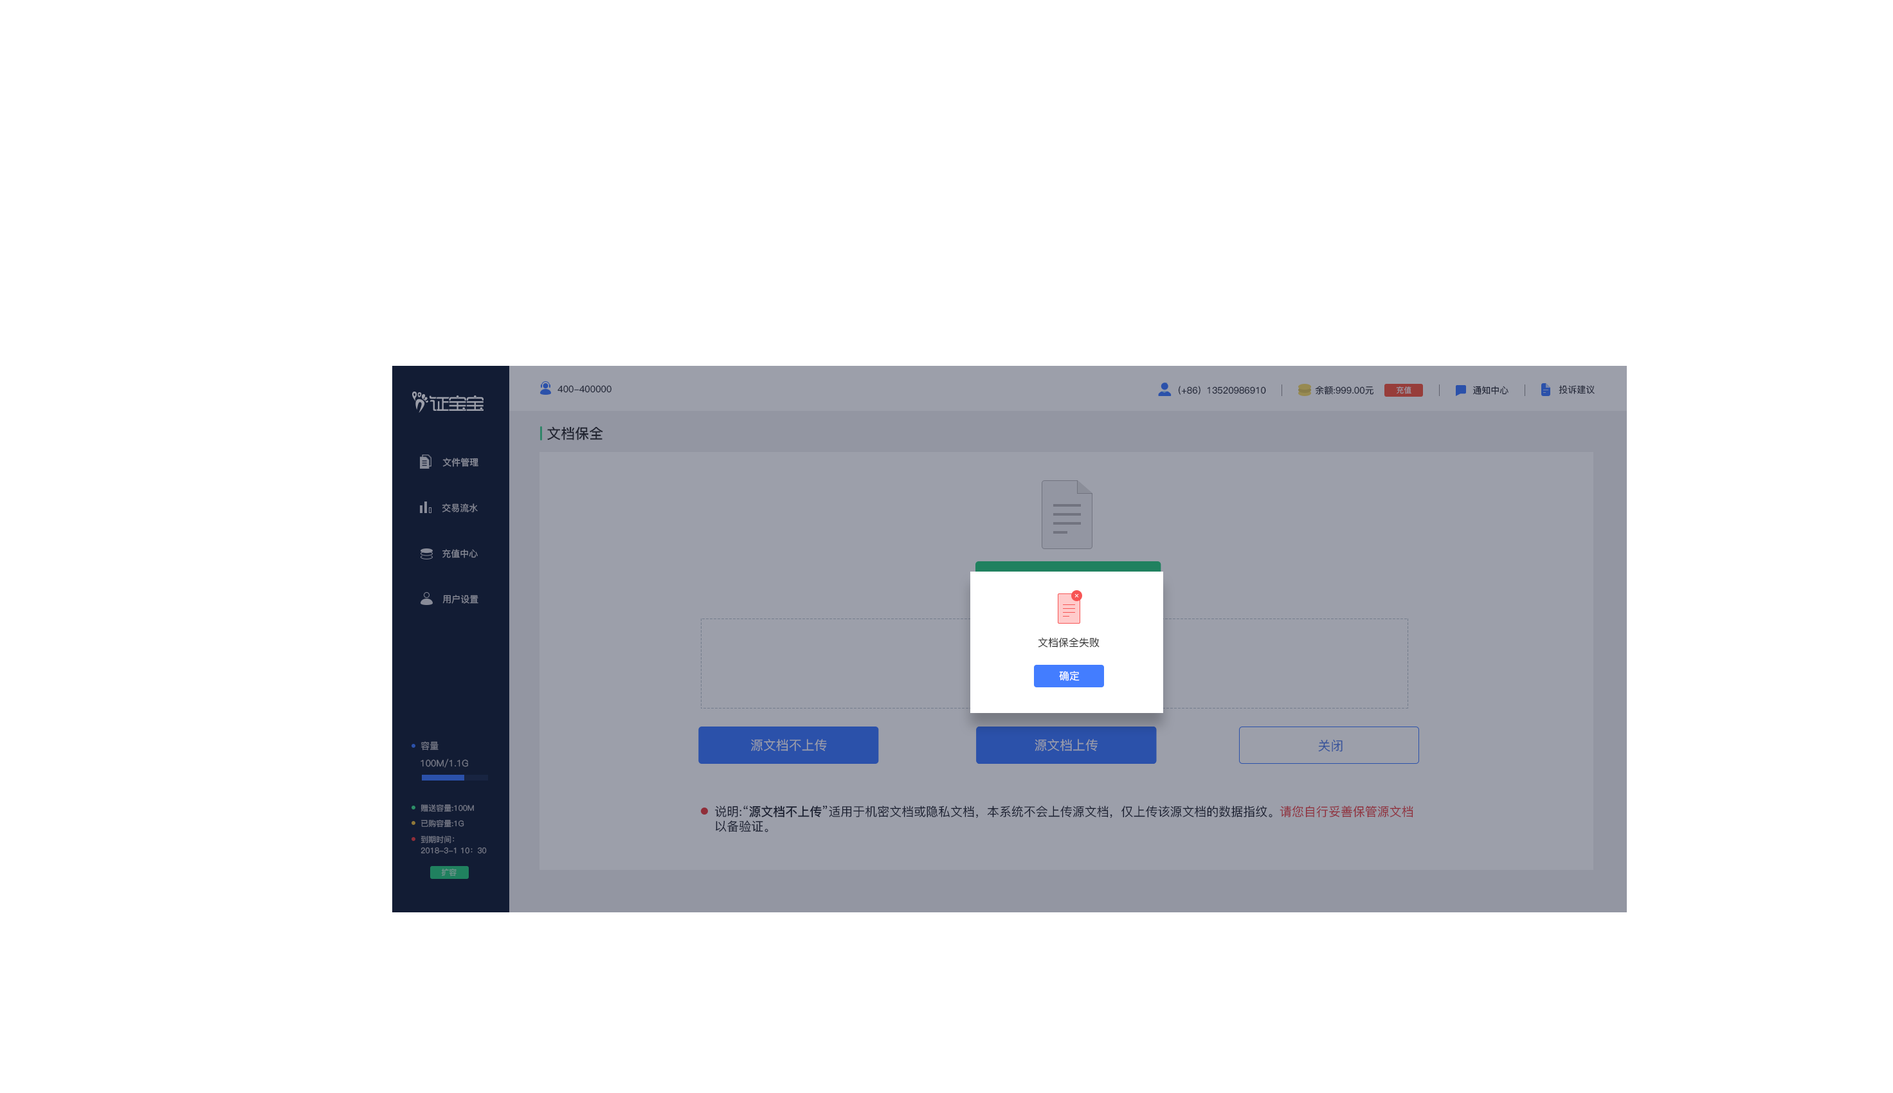
<style>
.page{position:relative;width:1893px;height:1093px;background:#ffffff}
.page>*{position:absolute;margin:0}
.t1{font:9px "PingFang-SC-Medium";color:#232730}
.t2{font:7.7px "PingFang-SC-Medium";color:#9c9faa}
.t3{font:14.1px "PingFang-SC-Bold";color:#333333}
.t4{font:9px "PingFang-SC-Bold";color:#888b98}
.t5{font:9px "PingFang-SC-Medium";color:#898b98}
.t6{font:10.3px "PingFang-SC-Medium";color:#333333}
.t7{font:10.3px "PingFang-SC-Medium";color:#ffffff}
.t8{font:9px "PingFang-SC-Medium";color:#777a88}
.t9{font:13.1px "PingFang-SC-Medium";color:#9c9faa}
.t10{font:12.9px "PingFang-SC-Medium";color:#9c9faa}
.t11{font:12.9px "PingFang-SC-Medium";color:#33519a}
.t12{font:7.7px "PingFang-SC-Medium";color:#777a88}
.t13{font:12.2px "PingFang-SC-Medium";color:#232730}
.t14{font:12.2px "PingFang-SC-Bold";color:#232730}
.t15{font:12.2px "PingFang-SC-Medium";color:#eb4343}
.t16{font:7.7px "PingFang-SC-Medium"}
</style>
<div class="page">
<p class="t1" style="left:557px;top:385px;width:54px;height:8px">400-400000</p>
<p class="t1" style="left:1178px;top:386px;width:88px;height:9px">（+86）13520986910</p>
<p class="t1" style="left:1315px;top:386px;width:59px;height:9px">余额:999.00元</p>
<p class="t2" style="left:1396px;top:386px;width:15px;height:8px">充值</p>
<p class="t1" style="left:1472px;top:386px;width:36px;height:9px">通知中心</p>
<p class="t1" style="left:1558px;top:385px;width:36px;height:9px">投诉建议</p>
<p class="t3" style="left:547px;top:426px;width:56px;height:14px">文档保全</p>
<p class="t4" style="left:442px;top:458px;width:36px;height:9px">文件管理</p>
<p class="t5" style="left:442px;top:503px;width:36px;height:9px">交易流水</p>
<p class="t5" style="left:442px;top:549px;width:36px;height:9px">充值中心</p>
<p class="t5" style="left:442px;top:595px;width:36px;height:9px">用户设置</p>
<p class="t6" style="left:1038px;top:637px;width:61px;height:10px">文档保全失败</p>
<p class="t7" style="left:1059px;top:670px;width:20px;height:11px">确定</p>
<p class="t8" style="left:421px;top:741px;width:17px;height:9px">容量</p>
<p class="t9" style="left:750px;top:739px;width:77px;height:13px">原文档不上传</p>
<p class="t10" style="left:751px;top:739px;width:76px;height:13px">源文档不上传</p>
<p class="t10" style="left:1034px;top:739px;width:64px;height:13px">源文档上传</p>
<p class="t11" style="left:1318px;top:739px;width:24px;height:13px">关闭</p>
<p class="t8" style="left:420px;top:759px;width:48px;height:9px">100M/1.1G</p>
<p class="t12" style="left:420px;top:804px;width:54px;height:8px">赠送容量:100M</p>
<p class="t13" style="left:715px;top:806px;width:698px;height:27px">说明:“<span class="t14">源文档不上传</span>”适用于机密文档或隐私文档，本系统不会上传源文档，仅上传该源文档的数据指纹。<span class="t15">请您自行妥善保管源文档<br></span>以备验证。</p>
<p class="t12" style="left:421px;top:820px;width:43px;height:7px">已购容量:1G</p>
<p class="t12" style="left:420px;top:836px;width:35px;height:7px">到期时间：</p>
<p class="t12" style="left:420px;top:847px;width:67px;height:7px">2018-3-1 10：30</p>
<p class="t16" style="left:441px;top:869px;width:15px;height:7px">扩容</p>
</div>
